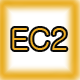
<style>
.page{position:relative;width:80px;height:80px;background:#ffffff}
.page>*{position:absolute;margin:0}
.t1{font:30.6px "Gulim";color:#efaf27}
</style>
<div class="page">
<p class="t1" style="left:12px;top:28px;width:55px;height:22px">EC2</p>
</div>
